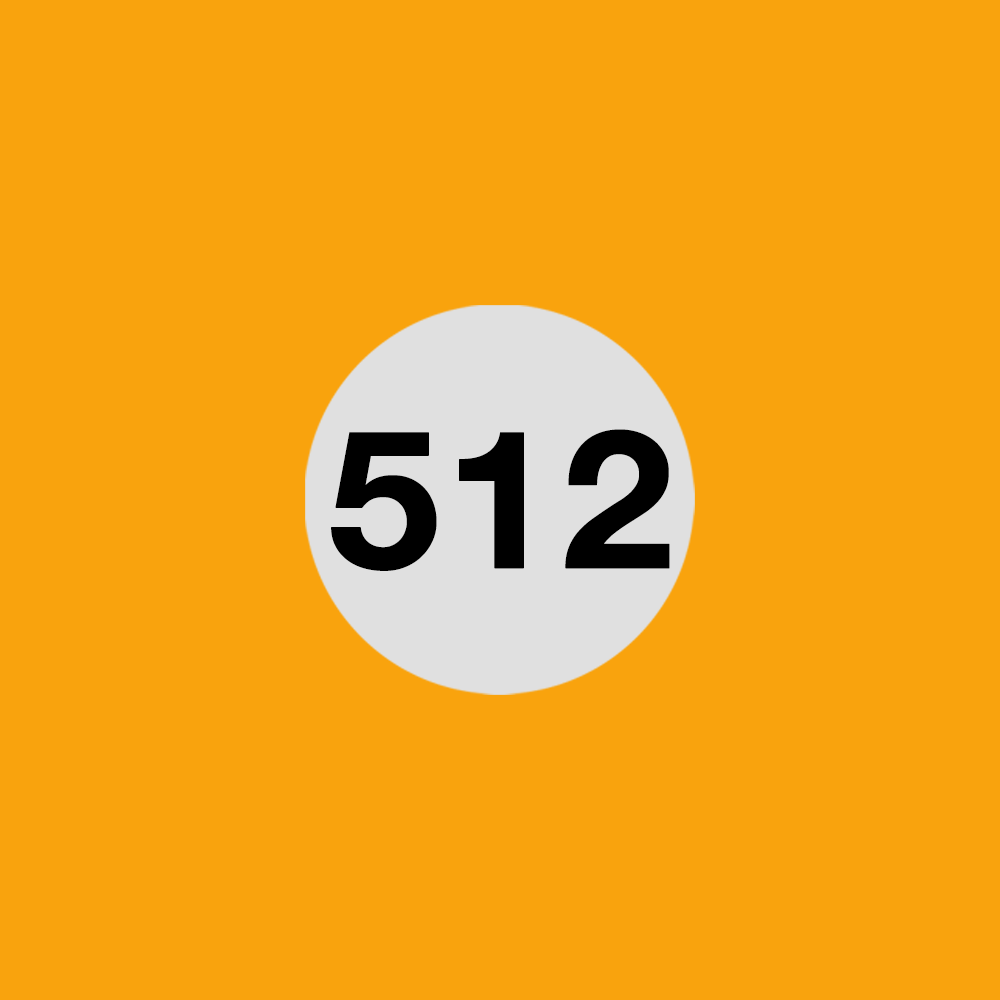
<style>
.page{position:relative;width:1000px;height:1000px;background:#f9a30d}
.page>*{position:absolute;margin:0}
.t1{font:192.9px "HelveticaNeue-Bold";color:#000000;font-weight:bold;scale:1.04 1}
</style>
<div class="page">
<p class="t1" style="left:331px;top:429px;width:339px;height:142px">512</p>
</div>
